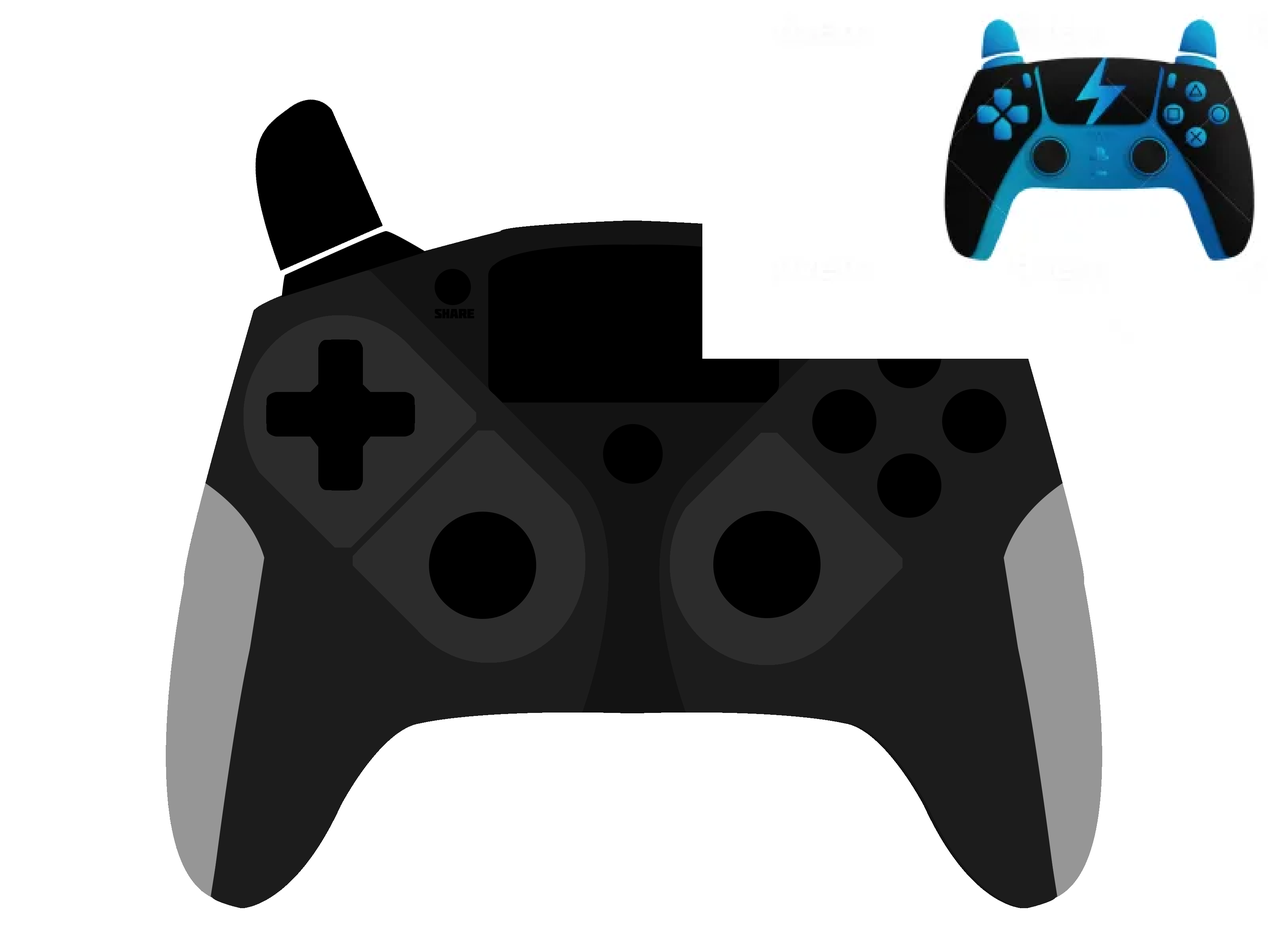
<style>
.page{position:relative;width:1268px;height:941px;background:#ffffff}
.page>*{position:absolute;margin:0}
.t1{font:11.1px "DeadpoolMovie";color:#000000}
</style>
<div class="page">
<p class="t1" style="left:434px;top:309px;width:40px;height:9px">share</p>
</div>
